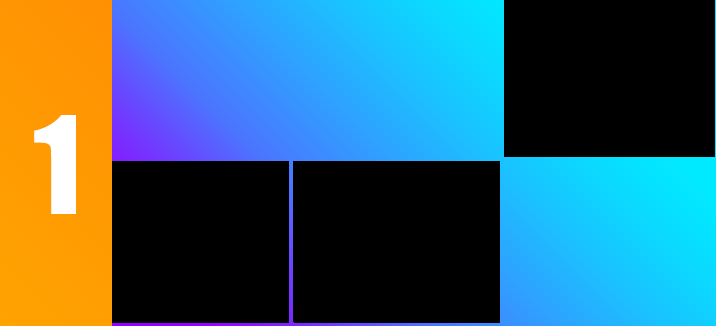
<style>
.page{position:relative;width:716px;height:326px;background:#000000}
.page>*{position:absolute;margin:0}
.t1{font:125px "Impact";color:#ffffff}
</style>
<div class="page">
<p class="t1" style="left:34px;top:115px;width:42px;height:99px">1</p>
</div>
